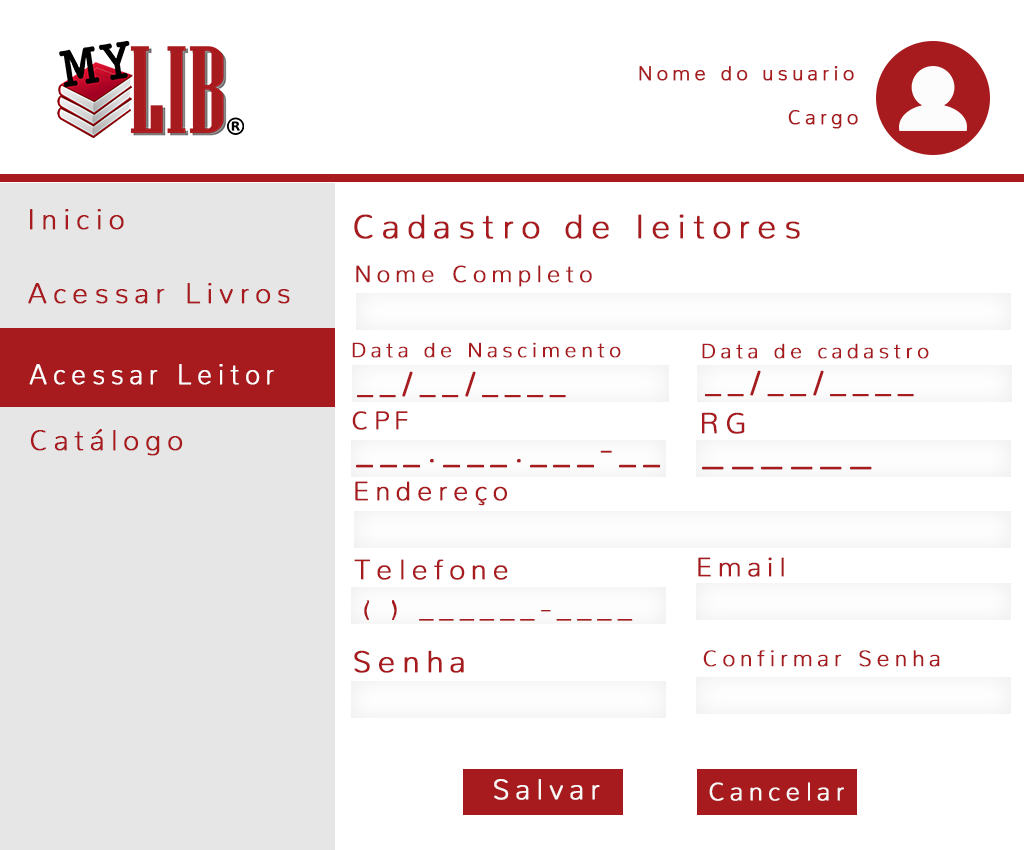
<style>
.page{position:relative;width:1024px;height:850px;background:#ffffff}
.page>*{position:absolute;margin:0}
.t1{font:20px "Nunito-ExtraLight";letter-spacing:0.2em;color:#a71b1e;font-weight:bold}
.t2{font:28px "Nunito-ExtraLight";letter-spacing:0.2em;color:#a71b1e;font-weight:bold}
.t3{font:33.8px "Nunito-ExtraLight";letter-spacing:0.2em;color:#a71b1e;font-weight:bold}
.t4{font:23.6px "Nunito-ExtraLight";letter-spacing:0.2em;color:#a71b1e;font-weight:bold}
.t5{font:20.8px "Nunito-ExtraLight";letter-spacing:0.2em;color:#a71b1e;font-weight:bold}
.t6{font:28px "Nunito-ExtraLight";letter-spacing:0.2em;color:#fffefe;font-weight:bold;scale:0.94 1}
.t7{font:30.8px "Nunito-ExtraLight";letter-spacing:0.2em;color:#a71b1e;font-weight:bold}
.t8{font:25.8px "Nunito-ExtraLight";letter-spacing:0.2em;color:#a71b1e;font-weight:bold}
.t9{font:29.1px "Nunito-ExtraLight";letter-spacing:0.2em;color:#a71b1e;font-weight:bold}
.t10{font:40.6px "Nunito-ExtraLight";letter-spacing:0.2em;color:#a71b1e;font-weight:bold;scale:0.8 1}
.t11{font:40.6px "Nunito-ExtraLight";letter-spacing:0.2em;color:#a71b1e;font-weight:bold}
.t12{font:26.8px "Nunito-ExtraLight";letter-spacing:0.2em;color:#a71b1e;font-weight:bold}
.t13{font:26.5px "Nunito-ExtraLight";letter-spacing:0.2em;color:#a71b1e;font-weight:bold}
.t14{font:28.1px "Nunito-ExtraLight";letter-spacing:0.2em;color:#a71b1e;font-weight:bold}
.t15{font:25.5px "Nunito-ExtraLight";letter-spacing:0.2em;color:#a71b1e;font-weight:bold;scale:1.09 1}
.t16{font:30.7px "Nunito-ExtraLight";letter-spacing:0.2em;color:#a71b1e;font-weight:bold}
.t17{font:22.4px "Nunito-ExtraLight";letter-spacing:0.2em;color:#a71b1e;font-weight:bold}
.t18{font:28.4px "Nunito-ExtraLight";letter-spacing:0.2em;color:#fbf8f8;font-weight:bold}
.t19{font:25.2px "Nunito-ExtraLight";letter-spacing:0.2em;color:#fbf8f8;font-weight:bold}
</style>
<div class="page">
<p class="t1" style="left:639px;top:66px;width:215px;height:15px">Nome do usuario</p>
<p class="t1" style="left:788px;top:110px;width:70px;height:19px">Cargo</p>
<p class="t2" style="left:30px;top:209px;width:94px;height:21px">Inicio</p>
<p class="t3" style="left:354px;top:214px;width:446px;height:25px">Cadastro de leitores</p>
<p class="t4" style="left:356px;top:265px;width:236px;height:22px">Nome Completo</p>
<p class="t2" style="left:28px;top:283px;width:262px;height:21px">Acessar Livros</p>
<p class="t5" style="left:352px;top:342px;width:269px;height:16px">Data de Nascimento</p>
<p class="t5" style="left:702px;top:343px;width:227px;height:16px">Data de cadastro</p>
<p class="t6" style="left:29px;top:364px;width:245px;height:21px">Acessar Leitor</p>
<p class="t7" style="left:357px;top:371px;width:209px;height:27px">__/__/____</p>
<p class="t7" style="left:705px;top:370px;width:209px;height:27px">__/__/____</p>
<p class="t8" style="left:352px;top:411px;width:56px;height:19px">CPF</p>
<p class="t9" style="left:702px;top:412px;width:43px;height:22px">RG</p>
<p class="t2" style="left:30px;top:429px;width:153px;height:27px">Catálogo</p>
<p class="t10" style="left:356px;top:450px;width:304px;height:18px">___.___.___-__</p>
<p class="t11" style="left:702px;top:466px;width:170px;height:4px">______</p>
<p class="t12" style="left:355px;top:481px;width:152px;height:25px">Endereço</p>
<p class="t13" style="left:698px;top:557px;width:86px;height:20px">Email</p>
<p class="t14" style="left:354px;top:559px;width:154px;height:21px">Telefone</p>
<p class="t15" style="left:364px;top:600px;width:269px;height:21px">( ) ______-____</p>
<p class="t16" style="left:354px;top:650px;width:110px;height:23px">Senha</p>
<p class="t17" style="left:703px;top:650px;width:237px;height:17px">Confirmar Senha</p>
<p class="t18" style="left:494px;top:779px;width:106px;height:21px">Salvar</p>
<p class="t19" style="left:709px;top:782px;width:135px;height:19px">Cancelar</p>
</div>
